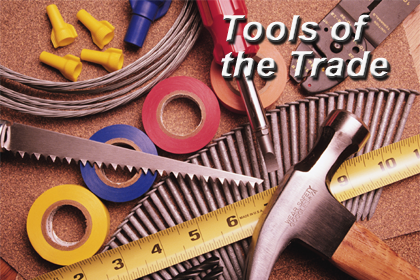
<style>
.page{position:relative;width:420px;height:280px}
.page>*{position:absolute;margin:0}
.t1{font:36px/36px "Arial-BoldItalicMT";font-weight:bold}
</style>
<div class="page">
<p class="t1" style="left:221px;top:14px;width:168px;height:64px">Tools of<br>the Trade</p>
</div>
